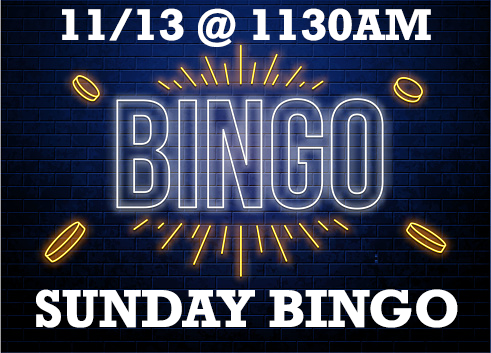
<style>
.page{position:relative;width:491px;height:353px}
.page>*{position:absolute;margin:0}
.t1{font:41.7px "Rockwell-Bold";color:#ffffff}
.t2{font:50px "Rockwell-Bold";color:#ffffff}
</style>
<div class="page">
<p class="t1" style="left:62px;top:8px;width:369px;height:39px">11/13 @ 1130AM</p>
<p class="t2" style="left:36px;top:289px;width:422px;height:39px">SUNDAY BINGO</p>
</div>
